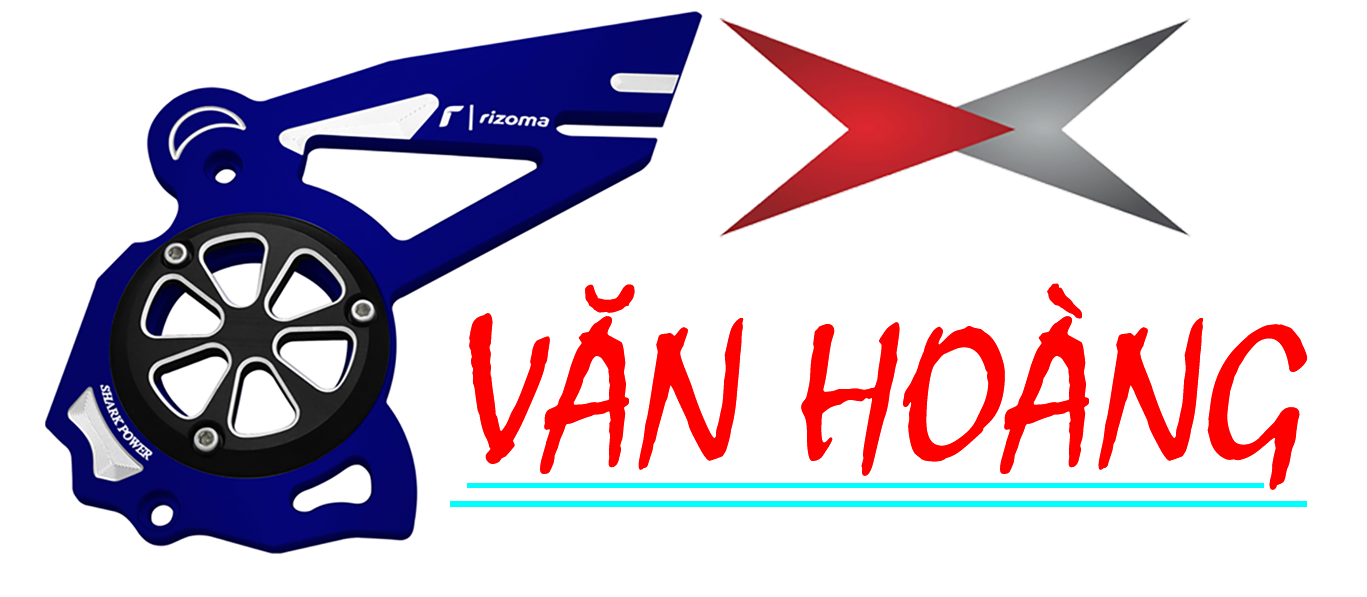
<style>
.page{position:relative;width:1367px;height:597px;background:#ffffff}
.page>*{position:absolute;margin:0}
.t1{font:204.2px "Mistral";color:#ff0000}
</style>
<div class="page">
<p class="t1" style="left:469px;top:283px;width:839px;height:207px">VĂN HOÀNG</p>
</div>
